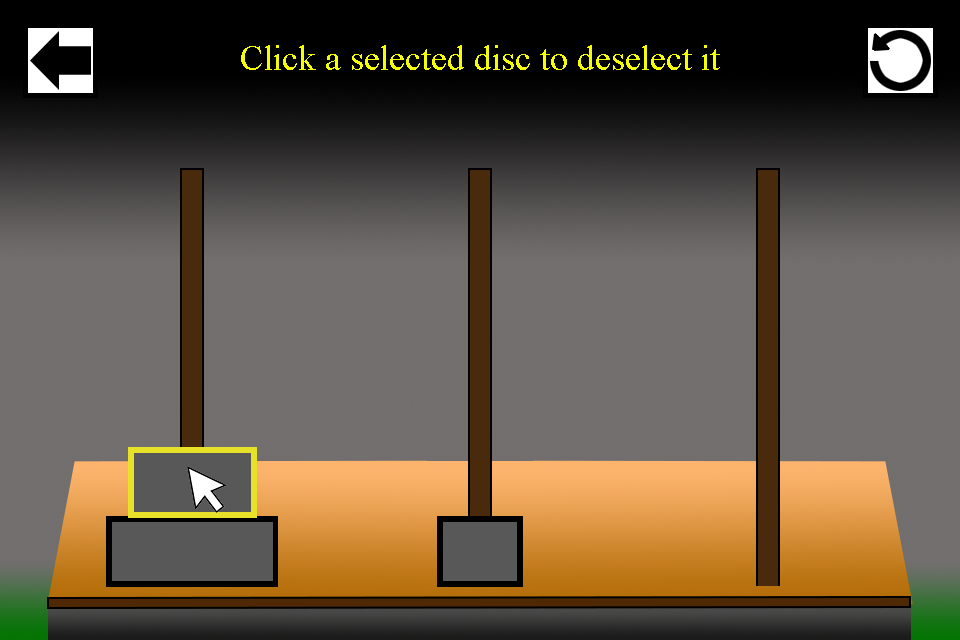
<style>
.page{position:relative;width:960px;height:640px}
.page>*{position:absolute;margin:0}
.t1{font:36px "TimesNewRomanPSMT";color:#f6ff00}
</style>
<div class="page">
<p class="t1" style="left:241px;top:45px;width:479px;height:25px">Click a selected disc to deselect it</p>
</div>
